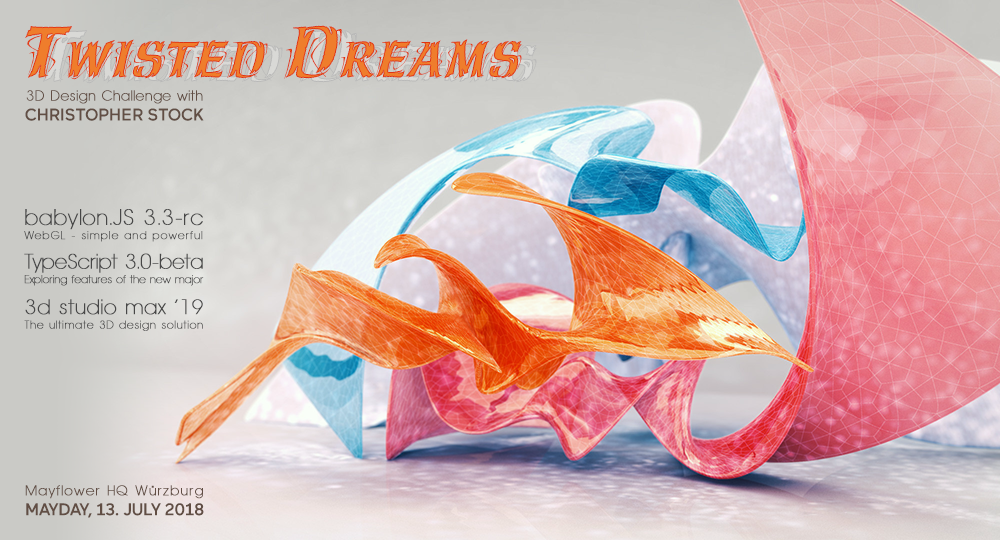
<style>
.page{position:relative;width:1000px;height:540px}
.page>*{position:absolute;margin:0}
.t1{font:79.5px "HazelLetPlain";color:#ef7d2c;font-variant:small-caps}
.t2{font:14.5px/20.1px "AvantageSmallNormal";letter-spacing:0.022em;color:#614e44;font-weight:bold}
.t3{font:16.9px/20.1px "Maax-Medium";letter-spacing:-0.007em;color:#614e44}
.t4{font:11.2px/14.4px "AvantageSmallNormal";letter-spacing:-0.01em;color:#474747;font-weight:bold}
.t5{font:21.9px/29.5px "AvantageSmallNormal";letter-spacing:0.02em;color:#474747;font-weight:bold}
.t6{font:11.2px/14.4px "AvantageSmallNormal";letter-spacing:0.085em;color:#474747;font-weight:bold}
.t7{font:20.7px/29.5px "AvantageSmallNormal";letter-spacing:-0.016em;color:#474747;font-weight:bold}
.t8{font:20.7px/31.1px "AvantageSmallNormal";letter-spacing:0.02em;color:#474747;font-weight:bold}
.t9{font:11.2px/14.4px "AvantageSmallNormal";letter-spacing:0.055em;color:#474747;font-weight:bold}
.t10{font:14.2px/20.2px "AvantageSmallNormal";letter-spacing:0.072em;color:#614e44;font-weight:bold}
.t11{font:16.9px/20.2px "Maax-Medium";letter-spacing:-0.025em;color:#614e44}
</style>
<div class="page">
<p class="t1" style="left:25px;top:25px;width:497px;height:55px">Twisted Dreams</p>
<p class="t2" style="left:25px;top:90px;width:179px;height:31px">3D Design Challenge with<br><span class="t3">CHRISTOPHER STOCK</span></p>
<p class="t4" style="left:24px;top:209px;width:180px;height:122px"><span class="t5">babylon.JS 3.3-rc<br></span><span class="t6">WebGL - simple and powerful<br></span><span class="t7">TypeScript 3.0-beta<br></span>Exploring features of the new major<br><span class="t8">3d studio max ‘19<br></span><span class="t9">The ultimate 3D design solution</span></p>
<p class="t10" style="left:25px;top:485px;width:179px;height:33px">Mayflower HQ Würzburg<br><span class="t11">MAYDAY, 13. JULY 2018</span></p>
</div>
